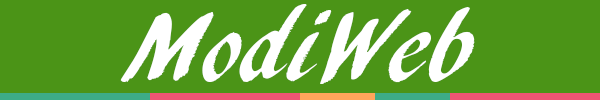
<style>
.page{position:relative;width:600px;height:100px;background:#4b9417}
.page>*{position:absolute;margin:0}
.t1{font:102px "ARBLANCA";color:#ffffff}
</style>
<div class="page">
<p class="t1" style="left:120px;top:4px;width:355px;height:80px">ModiWeb</p>
</div>
